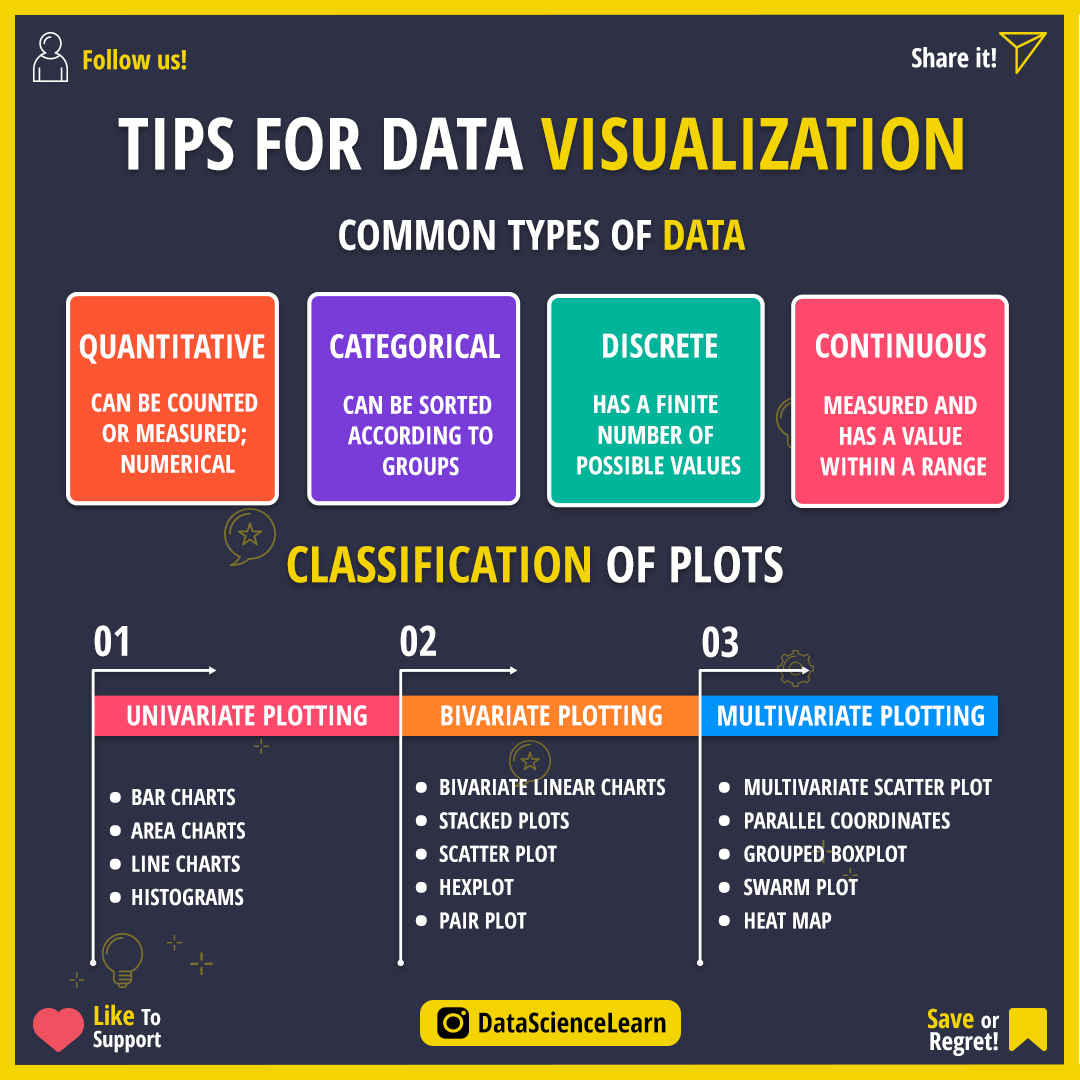
<style>
.page{position:relative;width:1080px;height:1080px;background:#2e3045}
.page>*{position:absolute;margin:0}
.t1{font:26.4px "OpenSans-CondensedBold";color:#f3d400}
.t2{font:26.4px "OpenSans-CondensedBold";color:#ffffff}
.t3{font:72.2px "OpenSans-CondensedBold";color:#fffffe}
.t4{font:72.2px "OpenSans-CondensedBold";color:#f3d400}
.t5{font:41.7px "OpenSans-CondensedBold";color:#ffffff}
.t6{font:41.7px "OpenSans-CondensedBold";color:#f3d400}
.t7{font:33.3px "OpenSans-CondensedBold";color:#ffffff}
.t8{font:25px/30.6px "OpenSans-CondensedBold";color:#ffffff}
.t9{font:50px "OpenSans-CondensedBold";color:#f3d400}
.t10{font:50px "OpenSans-CondensedBold";color:#fffffe}
.t11{font:27.8px "OpenSans-CondensedBold";color:#ffffff}
.t12{font:66.7px/33.3px "OpenSans-CondensedBold";color:#ffffff}
.t13{font:22.2px/33.3px "OpenSans-CondensedBold";color:#ffffff}
.t14{font:22.2px/22.2px "OpenSans-CondensedBold";color:#ffffff}
.t15{font:26.4px/22.2px "OpenSans-CondensedBold";color:#f3d400}
.t16{font:27.8px "OpenSans-CondensedBold";color:#000000}
.t17{font:25px/22.2px "OpenSans-CondensedBold";color:#ffffff}
</style>
<div class="page">
<p class="t1" style="left:83px;top:49px;width:103px;height:21px">Follow us!</p>
<p class="t2" style="left:912px;top:47px;width:84px;height:21px">Share it!</p>
<p class="t3" style="left:118px;top:117px;width:845px;height:54px">TIPS FOR DATA <span class="t4">VISUALIZATION</span></p>
<p class="t5" style="left:339px;top:219px;width:407px;height:32px">COMMON TYPES OF <span class="t6">DATA</span></p>
<p class="t7" style="left:79px;top:334px;width:186px;height:30px">QUANTITATIVE</p>
<p class="t7" style="left:330px;top:334px;width:170px;height:25px">CATEGORICAL</p>
<p class="t7" style="left:603px;top:333px;width:114px;height:25px">DISCRETE</p>
<p class="t7" style="left:816px;top:333px;width:170px;height:25px">CONTINUOUS</p>
<p class="t8" style="left:91px;top:393px;width:167px;height:80px;text-align:center">CAN BE COUNTED <br>OR MEASURED; <br>NUMERICAL</p>
<p class="t8" style="left:343px;top:395px;width:150px;height:81px;text-align:center">CAN BE SORTED <br>ACCORDING TO<br>GROUPS</p>
<p class="t8" style="left:577px;top:395px;width:164px;height:80px;text-align:center">HAS A FINITE <br>NUMBER OF <br>POSSIBLE VALUES</p>
<p class="t8" style="left:820px;top:396px;width:166px;height:80px;text-align:center">MEASURED AND <br>HAS A VALUE <br>WITHIN A RANGE</p>
<p class="t9" style="left:287px;top:546px;width:496px;height:37px">CLASSIFICATION <span class="t10">OF PLOTS</span></p>
<p class="t5" style="left:94px;top:625px;width:34px;height:32px">01</p>
<p class="t5" style="left:400px;top:625px;width:36px;height:32px">02</p>
<p class="t5" style="left:702px;top:626px;width:36px;height:32px">03</p>
<p class="t11" style="left:127px;top:705px;width:240px;height:21px">UNIVARIATE PLOTTING</p>
<p class="t11" style="left:441px;top:705px;width:221px;height:21px">BIVARIATE PLOTTING</p>
<p class="t11" style="left:718px;top:705px;width:266px;height:21px">MULTIVARIATE PLOTTING</p>
<p class="t12" style="left:415px;top:782px;width:12px;height:144px">.<br>.<br>.<br>.<br>.</p>
<p class="t13" style="left:439px;top:778px;width:226px;height:151px">BIVARIATE LINEAR CHARTS<br>STACKED PLOTS<br>SCATTER PLOT<br>HEXPLOT<br>PAIR PLOT</p>
<p class="t12" style="left:718px;top:782px;width:12px;height:144px">.<br>.<br>.<br>.<br>.</p>
<p class="t13" style="left:744px;top:778px;width:248px;height:151px">MULTIVARIATE SCATTER PLOT<br>PARALLEL COORDINATES<br>GROUPED BOXPLOT<br>SWARM PLOT<br>HEAT MAP</p>
<p class="t12" style="left:109px;top:792px;width:12px;height:111px">.<br>.<br>.<br>.</p>
<p class="t13" style="left:131px;top:788px;width:114px;height:118px">BAR CHARTS<br>AREA CHARTS<br>LINE CHARTS<br>HISTOGRAMS</p>
<p class="t14" style="left:93px;top:1004px;width:68px;height:49px"><span class="t15">Like </span>To<br>Support</p>
<p class="t16" style="left:479px;top:1011px;width:187px;height:22px">DataScienceLearn</p>
<p class="t17" style="left:928px;top:1008px;width:72px;height:48px;text-align:right"><span class="t15">Save </span><span class="t14">or<br></span>Regret!</p>
</div>
